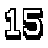
<style>
.page{position:relative;width:48px;height:48px;background:#ffffff}
.page>*{position:absolute;margin:0}
.t1{font:36px "KarmaFuture-Regular";color:#010101}
</style>
<div class="page">
<p class="t1" style="left:5px;top:8px;width:38px;height:32px">15</p>
</div>
